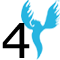
<style>
.page{position:relative;width:60px;height:60px;background:#ffffff}
.page>*{position:absolute;margin:0}
.t1{font:48px "Verdana";color:#000000}
</style>
<div class="page">
<p class="t1" style="left:2px;top:23px;width:28px;height:35px">4</p>
</div>
